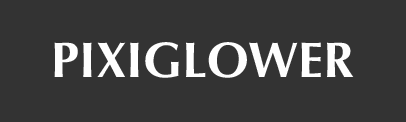
<style>
.page{position:relative;width:406px;height:122px;background:#333333}
.page>*{position:absolute;margin:0}
.t1{font:50px "Optima-Bold";color:#fefefe;text-transform:uppercase}
</style>
<div class="page">
<p class="t1" style="left:54px;top:42px;width:300px;height:36px">PixiGlower</p>
</div>
